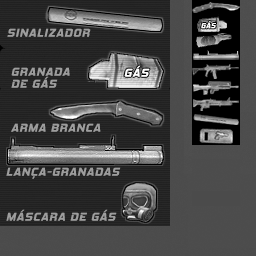
<style>
.page{position:relative;width:256px;height:256px}
.page>*{position:absolute;margin:0}
.t1{font:11.5px "HemiHeadRg-BoldItalic";letter-spacing:0.08em;color:#9d9d9d;text-transform:uppercase}
.t2{font:7.5px "HemiHeadRg-BoldItalic";letter-spacing:0.08em;color:#ffffff;text-transform:uppercase;scale:0.92 1}
.t3{font:11.5px "HemiHeadRg-BoldItalic";letter-spacing:0.08em;color:#ffffff;text-transform:uppercase}
.t4{font:11.5px/12px "HemiHeadRg-BoldItalic";letter-spacing:0.08em;color:#9d9d9d;text-transform:uppercase}
</style>
<div class="page">
<p class="t1" style="left:7px;top:28px;width:84px;height:9px">SINALIZADOR</p>
<p class="t2" style="left:201px;top:21px;width:15px;height:8px">gás</p>
<p class="t3" style="left:124px;top:65px;width:26px;height:12px">gás</p>
<p class="t4" style="left:11px;top:67px;width:59px;height:21px">GRANADA <br>DE GÁS</p>
<p class="t1" style="left:11px;top:123px;width:90px;height:9px">ARMA BRANCA</p>
<p class="t1" style="left:6px;top:167px;width:115px;height:12px">lança-granadas</p>
<p class="t1" style="left:6px;top:209px;width:111px;height:12px">MÁSCARA DE GÁS</p>
</div>
